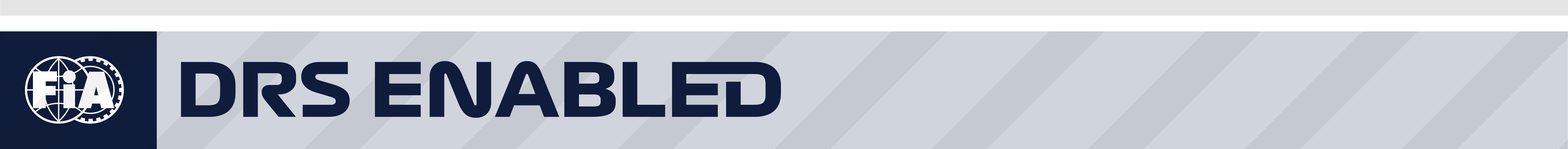
<style>
.page{position:relative;width:1568px;height:149px;background:#d0d4dc}
.page>*{position:absolute;margin:0}
.t1{font:73.2px "Formula1-Display-Bold";color:#101c3c}
</style>
<div class="page">
<p class="t1" style="left:181px;top:61px;width:600px;height:57px">DRS ENABLED</p>
</div>
